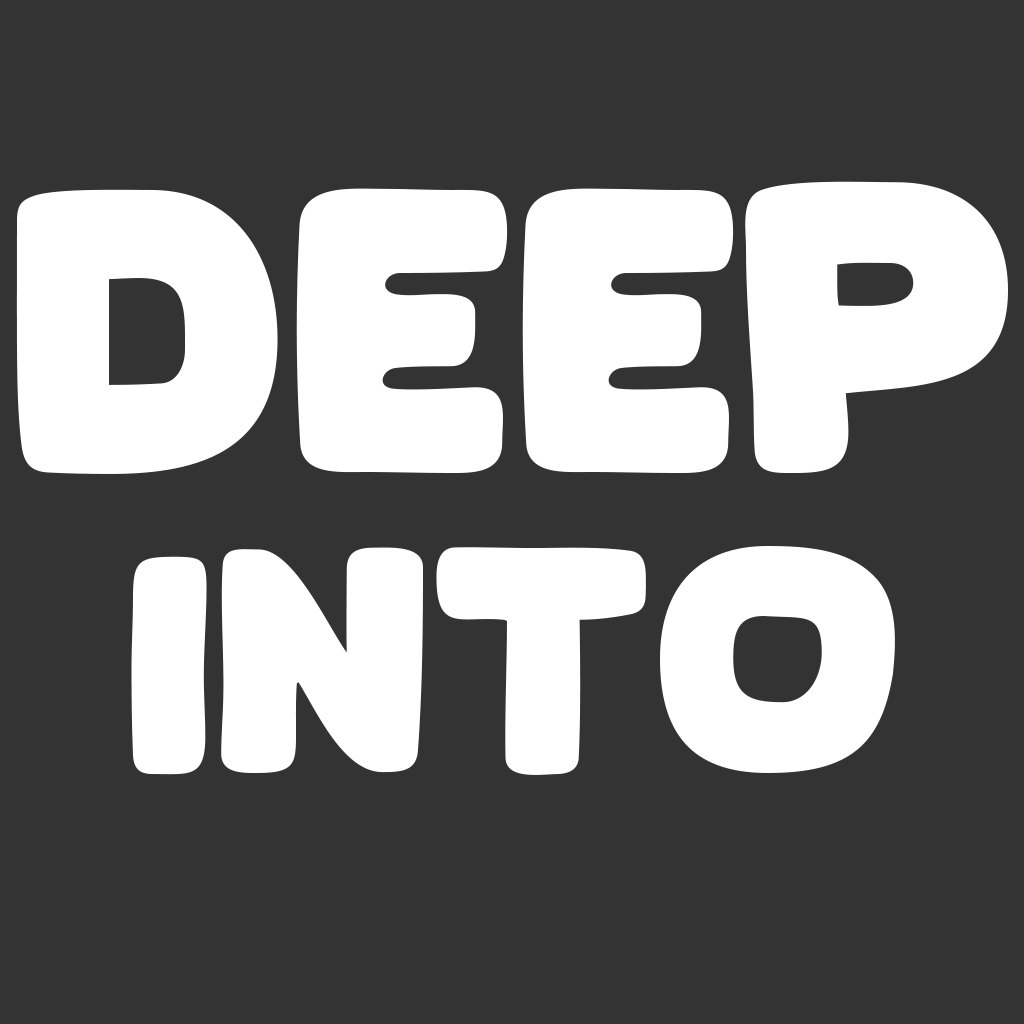
<style>
.page{position:relative;width:1024px;height:1024px;background:#333333}
.page>*{position:absolute;margin:0}
.t1{font:376px "Planet-Comic";color:#ffffff}
.t2{font:300px "Planet-Comic";color:#ffffff}
</style>
<div class="page">
<p class="t1" style="left:16px;top:181px;width:992px;height:293px">deep</p>
<p class="t2" style="left:131px;top:546px;width:764px;height:229px">Into</p>
</div>
